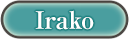
<style>
.page{position:relative;width:129px;height:39px;background:#4a9e9f}
.page>*{position:absolute;margin:0}
.t1{font:24px "RyuminPro-ExBold";letter-spacing:-0.04em;color:#ffffff}
</style>
<div class="page">
<p class="t1" style="left:35px;top:10px;width:59px;height:20px">Irako</p>
</div>
